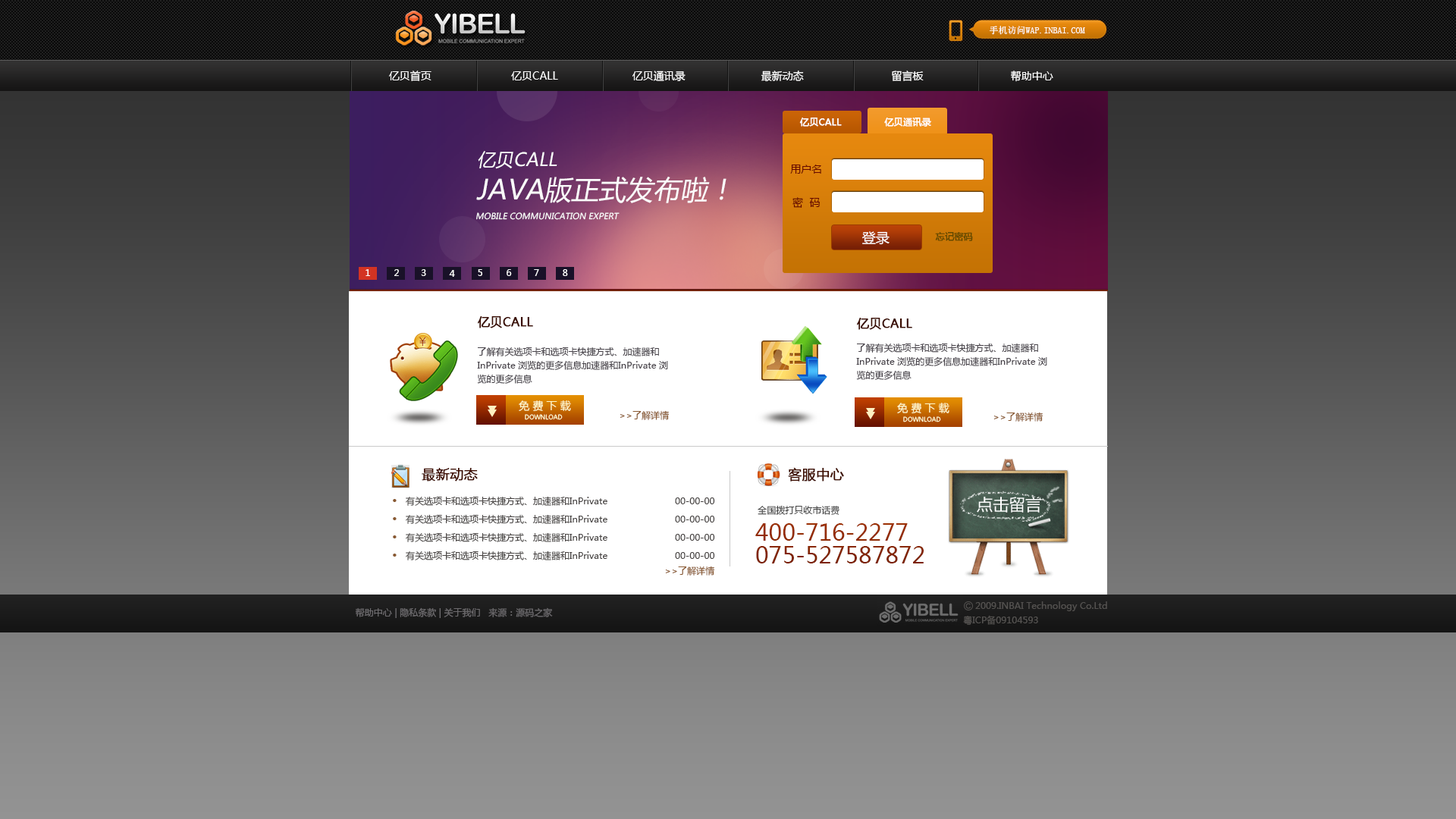
<style>
.page{position:relative;width:1456px;height:819px}
.page>*{position:absolute;margin:0}
.t1{font:9.1px "SimSun";color:#ffffff}
.t2{font:10.6px "MicrosoftYaHei";color:#ffffff}
.t3{font:9.1px "MicrosoftYaHei";color:#ffffff;font-weight:bold}
.t4{font:18.2px "MicrosoftYaHei";color:#fbfbfb;font-style:italic}
.t5{font:10.6px "MicrosoftYaHei";color:#660800}
.t6{font:27.3px "MicrosoftYaHei";color:#fbfbfb;font-style:italic}
.t7{font:8.3px "MicrosoftYaHei";color:#fbfbfb;font-style:italic}
.t8{font:13.6px "MicrosoftYaHei";color:#fffefe}
.t9{font:9.1px "MicrosoftYaHei";color:#634900;font-weight:bold}
.t10{font:9.1px "MicrosoftYaHei";color:#ffffff}
.t11{font:12.1px "MicrosoftYaHei";color:#3a0c00;font-weight:bold}
.t12{font:9.1px/13.6px "MicrosoftYaHei";color:#48434a}
.t13{font:10.6px "MicrosoftYaHei";color:#fff9ce}
.t14{font:9.1px "MicrosoftYaHei";color:#895931}
.t15{font:6.1px "MicrosoftYaHei";color:#fff9ce}
.t16{font:13.6px "MicrosoftYaHei";color:#3e0d00;font-weight:bold}
.t17{font:9.1px/18.2px "MicrosoftYaHei";color:#484443}
.t18{font:27.3px/18.2px "MicrosoftYaHei";color:#895931}
.t19{font:9.1px "MicrosoftYaHei";color:#454545}
.t20{font:22.7px/22.7px "MicrosoftYaHei";color:#892700}
.t21{font:9.1px "MicrosoftYaHei";color:#545250}
.t22{font:9.1px "MicrosoftYaHei";color:#6e6c6f}
</style>
<div class="page">
<p class="t1" style="left:990px;top:26px;width:95px;height:9px">手机访问WAP.INBAI.COM</p>
<p class="t2" style="left:389px;top:71px;width:42px;height:10px">亿贝首页</p>
<p class="t2" style="left:511px;top:71px;width:47px;height:9px">亿贝CALL</p>
<p class="t2" style="left:632px;top:71px;width:54px;height:10px">亿贝通讯录</p>
<p class="t2" style="left:761px;top:71px;width:43px;height:11px">最新动态</p>
<p class="t2" style="left:892px;top:71px;width:32px;height:10px">留言板</p>
<p class="t2" style="left:1011px;top:71px;width:42px;height:11px">帮助中心</p>
<p class="t3" style="left:799px;top:118px;width:43px;height:9px">亿贝CALL</p>
<p class="t3" style="left:884px;top:118px;width:47px;height:9px">亿贝通讯录</p>
<p class="t4" style="left:478px;top:151px;width:79px;height:18px">亿贝CALL</p>
<p class="t5" style="left:790px;top:165px;width:31px;height:9px">用户名</p>
<p class="t6" style="left:476px;top:177px;width:250px;height:26px">JAVA版正式发布啦！</p>
<p class="t5" style="left:792px;top:197px;width:28px;height:11px">密  码</p>
<p class="t7" style="left:476px;top:212px;width:144px;height:8px">MOBILE COMMUNICATION EXPERT</p>
<p class="t8" style="left:862px;top:231px;width:28px;height:14px">登录</p>
<p class="t9" style="left:935px;top:232px;width:38px;height:9px">忘记密码</p>
<p class="t10" style="left:366px;top:269px;width:4px;height:7px">1</p>
<p class="t10" style="left:394px;top:269px;width:5px;height:7px">2</p>
<p class="t10" style="left:421px;top:269px;width:5px;height:7px">3</p>
<p class="t10" style="left:449px;top:270px;width:6px;height:7px">4</p>
<p class="t10" style="left:478px;top:269px;width:4px;height:7px">5</p>
<p class="t10" style="left:507px;top:269px;width:5px;height:7px">6</p>
<p class="t10" style="left:534px;top:269px;width:5px;height:7px">7</p>
<p class="t10" style="left:563px;top:269px;width:5px;height:7px">8</p>
<p class="t11" style="left:478px;top:316px;width:55px;height:12px">亿贝CALL</p>
<p class="t11" style="left:857px;top:318px;width:55px;height:12px">亿贝CALL</p>
<p class="t12" style="left:477px;top:347px;width:191px;height:37px">了解有关选项卡和选项卡快捷方式、加速器和<br>InPrivate 浏览的更多信息加速器和InPrivate 浏<br>览的更多信息</p>
<p class="t12" style="left:856px;top:343px;width:191px;height:37px">了解有关选项卡和选项卡快捷方式、加速器和<br>InPrivate 浏览的更多信息加速器和InPrivate 浏<br>览的更多信息</p>
<p class="t13" style="left:519px;top:400px;width:52px;height:12px">免 费 下 载</p>
<p class="t14" style="left:620px;top:410px;width:50px;height:10px">&gt;&gt;了解详情</p>
<p class="t13" style="left:897px;top:403px;width:52px;height:11px">免 费 下 载</p>
<p class="t14" style="left:993px;top:412px;width:50px;height:10px">&gt;&gt;了解详情</p>
<p class="t15" style="left:525px;top:414px;width:38px;height:6px">DOWNLOAD</p>
<p class="t15" style="left:903px;top:416px;width:38px;height:6px">DOWNLOAD</p>
<p class="t16" style="left:422px;top:468px;width:56px;height:14px">最新动态</p>
<p class="t16" style="left:788px;top:467px;width:56px;height:15px">客服中心</p>
<p class="t17" style="left:406px;top:496px;width:309px;height:64px">有关选项卡和选项卡快捷方式、加速器和InPrivate                         00-00-00<br>有关选项卡和选项卡快捷方式、加速器和InPrivate                         00-00-00<br>有关选项卡和选项卡快捷方式、加速器和InPrivate                         00-00-00<br>有关选项卡和选项卡快捷方式、加速器和InPrivate                         00-00-00</p>
<p class="t18" style="left:393px;top:499px;width:4px;height:58px">·<br>·<br>·<br>·</p>
<p class="t19" style="left:758px;top:505px;width:81px;height:10px">全国拨打只收市话费</p>
<p class="t20" style="left:755px;top:523px;width:169px;height:40px">400-716-2277<br>075-527587872</p>
<p class="t14" style="left:665px;top:566px;width:50px;height:10px">&gt;&gt;了解详情</p>
<p class="t21" style="left:975px;top:601px;width:132px;height:10px">2009.INBAI Technology Co.Ltd</p>
<p class="t22" style="left:355px;top:607px;width:198px;height:11px">帮助中心 | 隐私条款 | 关于我们   来源：源码之家</p>
<p class="t21" style="left:963px;top:615px;width:75px;height:10px">粤ICP备09104593</p>
</div>
